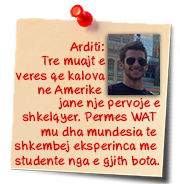
<style>
.page{position:relative;width:180px;height:184px;background:#ffffff}
.page>*{position:absolute;margin:0}
.t1{font:12px "AxureHandwriting-Bold";color:#da0606}
</style>
<div class="page">
<p class="t1" style="left:15px;top:41px;width:91px;height:54px;text-align:right">Arditi:<br>Tre muajt e<br>veres qe kalova<br>ne Amerike</p>
<p class="t1" style="left:14px;top:97px;width:147px;height:71px;text-align:right">jane nje pervoje e<br>shkelqyer. Permes WAT <br>mu dha mundesia te <br>shkembej eksperinca me <br>studente nga e gjith bota.</p>
</div>
